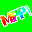
<style>
.page{position:relative;width:32px;height:32px;background:#00ff00}
.page>*{position:absolute;margin:0}
.t1{font:12.7px "Pretendo"}
.t2{font:12.7px "Verdana"}
</style>
<div class="page">
<p class="t1" style="left:0px;top:6px;width:31px;height:20px;rotate:-23deg">MPP<span class="t2">!</span></p>
</div>
